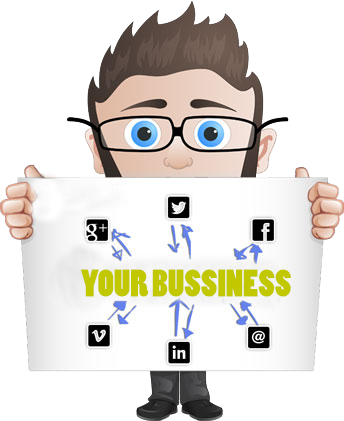
<style>
.page{position:relative;width:344px;height:421px;background:#ffffff}
.page>*{position:absolute;margin:0}
.t1{font:36px "PoplarStd";color:#c1c800}
</style>
<div class="page">
<p class="t1" style="left:80px;top:269px;width:211px;height:28px">YOUR BUSSINESS</p>
</div>
